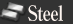
<style>
.page{position:relative;width:73px;height:24px;background:#333333}
.page>*{position:absolute;margin:0}
.t1{font:21px "RyuminPro-ExBold";letter-spacing:-0.04em;color:#fdf4ef;scale:0.8 1}
</style>
<div class="page">
<p class="t1" style="left:28px;top:5px;width:35px;height:16px">Steel</p>
</div>
